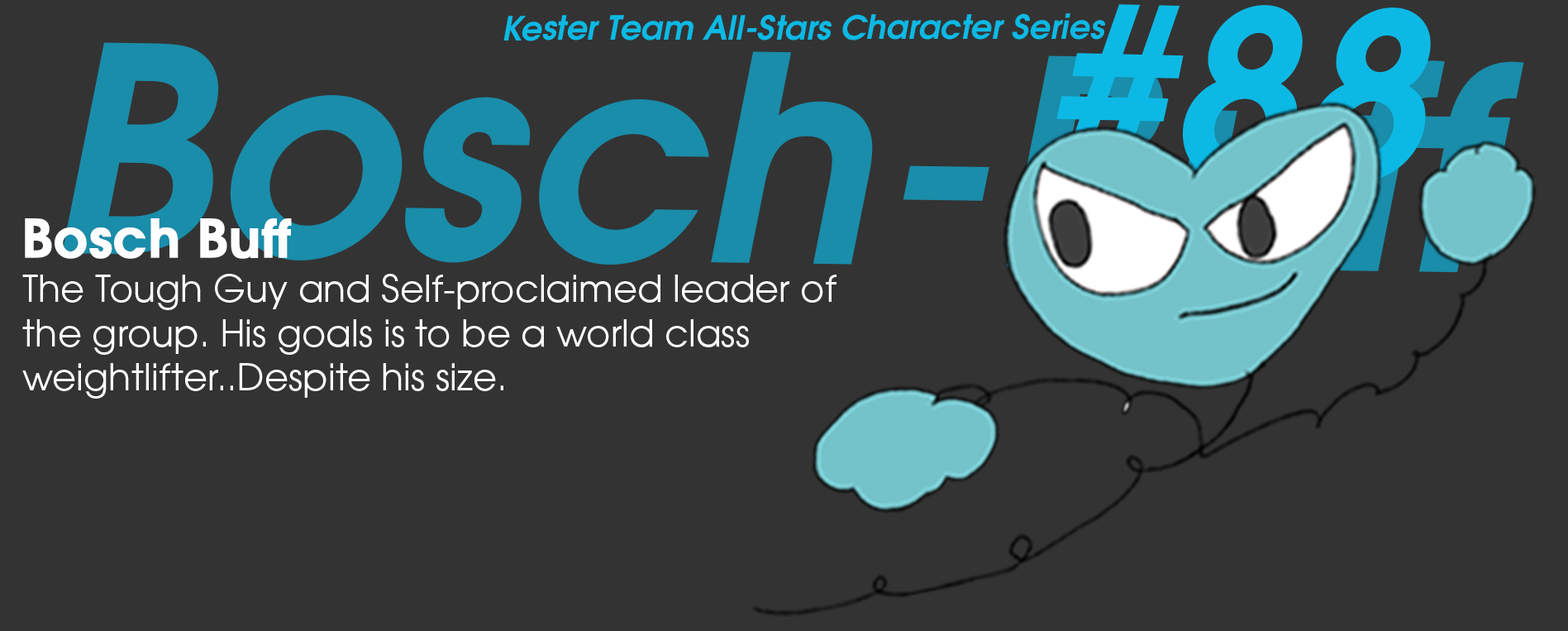
<style>
.page{position:relative;width:1568px;height:631px;background:#333333}
.page>*{position:absolute;margin:0}
.t1{font:229px "TeXGyreAdventor-BoldItalic";color:#0cb9e4}
.t2{font:33.1px "TeXGyreAdventor-BoldItalic";color:#0cb9e4}
.t3{font:285.5px "TeXGyreAdventor-BoldItalic"}
.t4{font:37px "TeXGyreAdventor-Regular";color:#ffffff}
.t5{font:52.4px/61.7px "TeXGyreAdventor-Bold";color:#ffffff;font-weight:bold}
</style>
<div class="page">
<p class="t1" style="left:1056px;top:4px;width:375px;height:179px;rotate:1deg">#88</p>
<p class="t2" style="left:503px;top:13px;width:602px;height:28px">Kester Team All-Stars Character Series</p>
<p class="t3" style="left:62px;top:42px;width:1462px;height:231px;rotate:1deg">Bosch-Buff</p>
<p class="t4" style="left:22px;top:218px;width:814px;height:180px"><span class="t5">Bosch Buff<br></span>The Tough Guy and Self-proclaimed leader of the group. His goals is to be a world class weightlifter..Despite his size.</p>
</div>
